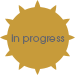
<style>
.page{position:relative;width:75px;height:75px;background:#c79b3a}
.page>*{position:absolute;margin:0}
.t1{font:10px "TeXGyreAdventor-Regular";letter-spacing:0.025em;color:#676767}
</style>
<div class="page">
<p class="t1" style="left:11px;top:34px;width:54px;height:10px">in progress</p>
</div>
